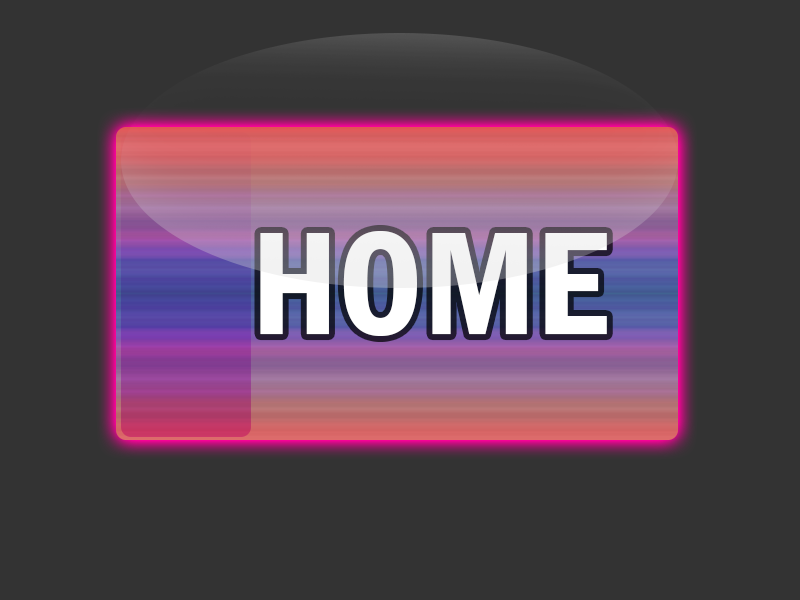
<style>
.page{position:relative;width:800px;height:600px;background:#333333}
.page>*{position:absolute;margin:0}
.t1{font:151px "FranklinGothic-DemiCond";color:#ffffff}
</style>
<div class="page">
<p class="t1" style="left:260px;top:231px;width:347px;height:105px">HOME</p>
</div>
